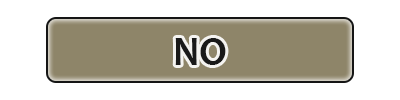
<style>
.page{position:relative;width:400px;height:100px;background:#ffffff}
.page>*{position:absolute;margin:0}
.t1{font:42.4px "Candara-Bold";letter-spacing:-0.02em;color:#191919;scale:0.94 1}
</style>
<div class="page">
<p class="t1" style="left:175px;top:38px;width:51px;height:27px">NO</p>
</div>
